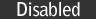
<style>
.page{position:relative;width:96px;height:19px;background:#333333}
.page>*{position:absolute;margin:0}
.t1{font:19px "BellGothicStd-Bold";letter-spacing:-0.025em;color:#ffffff}
</style>
<div class="page">
<p class="t1" style="left:17px;top:1px;width:63px;height:16px">Disabled</p>
</div>
